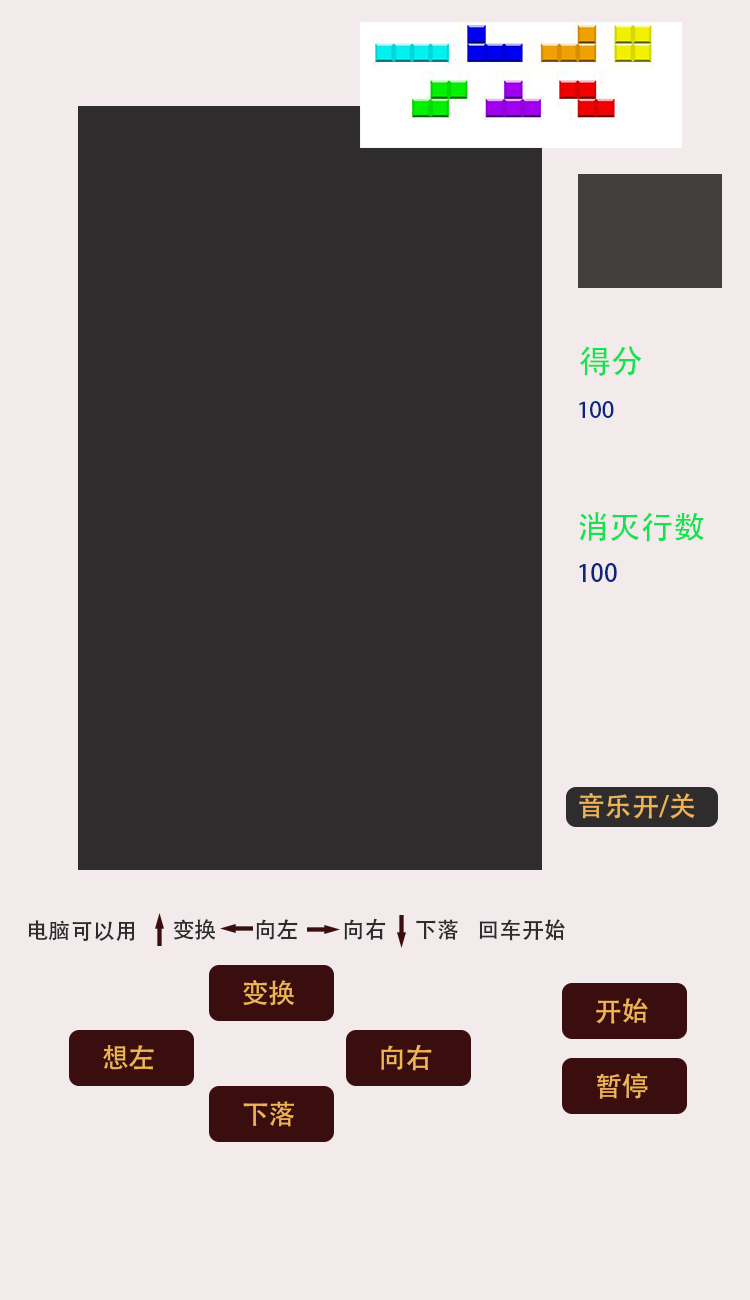
<style>
.page{position:relative;width:750px;height:1300px;background:#f3eaeb}
.page>*{position:absolute;margin:0}
.t1{font:32px "AdobeHeitiStd-Regular";color:#15e24f}
.t2{font:22px "AdobeHeitiStd-Regular";color:#0b2680}
.t3{font:24px "AdobeHeitiStd-Regular";color:#0b2680}
.t4{font:27px "AdobeHeitiStd-Regular";color:#efb456}
.t5{font:22px "AdobeHeitiStd-Regular";color:#2e2c2c}
</style>
<div class="page">
<p class="t1" style="left:580px;top:346px;width:62px;height:30px">得分</p>
<p class="t2" style="left:579px;top:401px;width:35px;height:17px">100</p>
<p class="t1" style="left:579px;top:512px;width:125px;height:30px">消灭行数</p>
<p class="t3" style="left:579px;top:563px;width:38px;height:19px">100</p>
<p class="t4" style="left:579px;top:793px;width:116px;height:26px">音乐开/关</p>
<p class="t5" style="left:344px;top:918px;width:42px;height:22px">向右</p>
<p class="t5" style="left:28px;top:920px;width:107px;height:21px">电脑可以用</p>
<p class="t5" style="left:173px;top:919px;width:43px;height:21px">变换</p>
<p class="t5" style="left:256px;top:919px;width:42px;height:21px">向左</p>
<p class="t5" style="left:416px;top:919px;width:42px;height:21px">下落</p>
<p class="t5" style="left:479px;top:919px;width:86px;height:22px">回车开始</p>
<p class="t4" style="left:243px;top:980px;width:51px;height:26px">变换</p>
<p class="t4" style="left:596px;top:998px;width:52px;height:26px">开始</p>
<p class="t4" style="left:103px;top:1045px;width:51px;height:25px">想左</p>
<p class="t4" style="left:381px;top:1044px;width:51px;height:27px">向右</p>
<p class="t4" style="left:597px;top:1073px;width:51px;height:26px">暂停</p>
<p class="t4" style="left:243px;top:1101px;width:51px;height:26px">下落</p>
</div>
